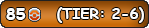
<style>
.page{position:relative;width:149px;height:28px}
.page>*{position:absolute;margin:0}
.t1{font:12px "ComicSansMS-Bold";color:#ffffff}
.t2{font:14.7px "ComicSansMS-Bold";color:#ffffff}
</style>
<div class="page">
<p class="t1" style="left:6px;top:8px;width:20px;height:12px">85</p>
<p class="t2" style="left:57px;top:7px;width:87px;height:16px">(TIER: 2-6)</p>
</div>
